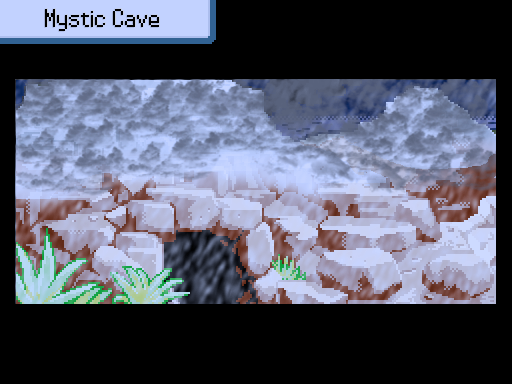
<style>
.page{position:relative;width:512px;height:384px;background:#000000}
.page>*{position:absolute;margin:0}
.t1{font:26px "PowerClear-Regular";color:#000000}
</style>
<div class="page">
<p class="t1" style="left:45px;top:9px;width:114px;height:22px">Mystic Cave</p>
</div>
